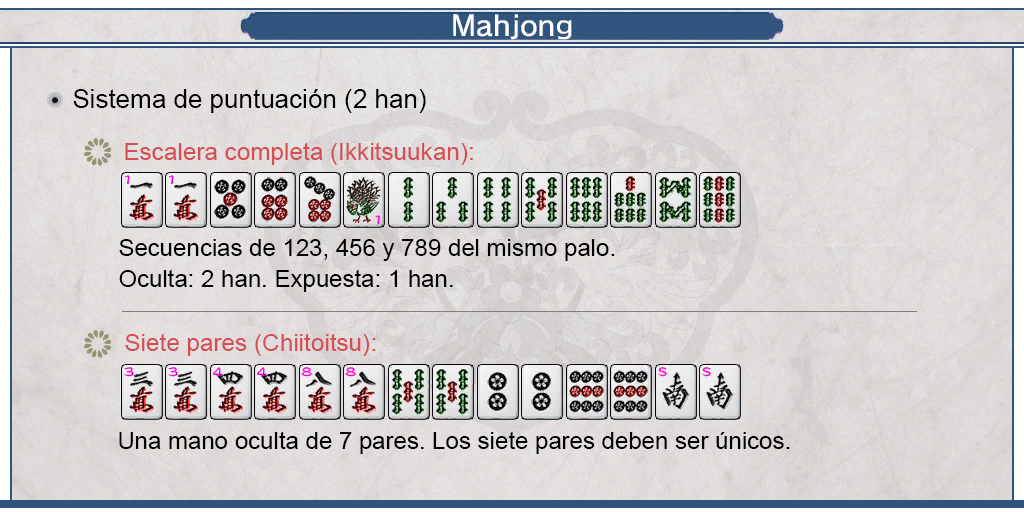
<style>
.page{position:relative;width:1024px;height:512px}
.page>*{position:absolute;margin:0}
.t1{font:26px "ArialMT";color:#000000}
.t2{font:24px "ArialMT";color:#d64d52}
.t3{font:24px/31px "ArialMT";color:#000000}
.t4{font:24px "ArialMT";color:#000000}
</style>
<div class="page">
<p class="t1" style="left:73px;top:89px;width:353px;height:24px">Sistema de puntuación (2 han)</p>
<p class="t2" style="left:125px;top:142px;width:348px;height:23px">Escalera completa (Ikkitsuukan):</p>
<p class="t3" style="left:119px;top:239px;width:496px;height:53px;text-align:justify">Secuencias de 123, 456 y 789 del mismo palo.<br>Oculta: 2 han. Expuesta: 1 han.</p>
<p class="t2" style="left:125px;top:333px;width:251px;height:23px">Siete pares (Chiitoitsu):</p>
<p class="t4" style="left:119px;top:431px;width:671px;height:23px">Una mano oculta de 7 pares. Los siete pares deben ser únicos.</p>
</div>
